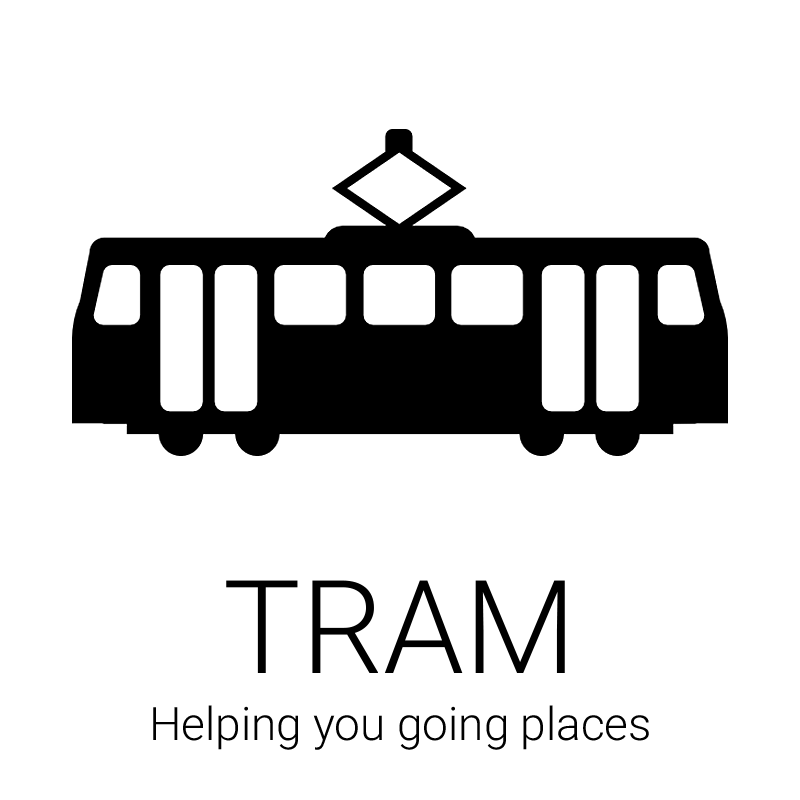
<style>
.page{position:relative;width:800px;height:800px;background:#ffffff}
.page>*{position:absolute;margin:0}
.t1{font:130px "Roboto-Light";color:#000000}
.t2{font:46px "Roboto-Light";color:#000000}
</style>
<div class="page">
<p class="t1" style="left:226px;top:580px;width:339px;height:93px">TRAM</p>
<p class="t2" style="left:153px;top:705px;width:496px;height:45px">Helping you going places</p>
</div>
